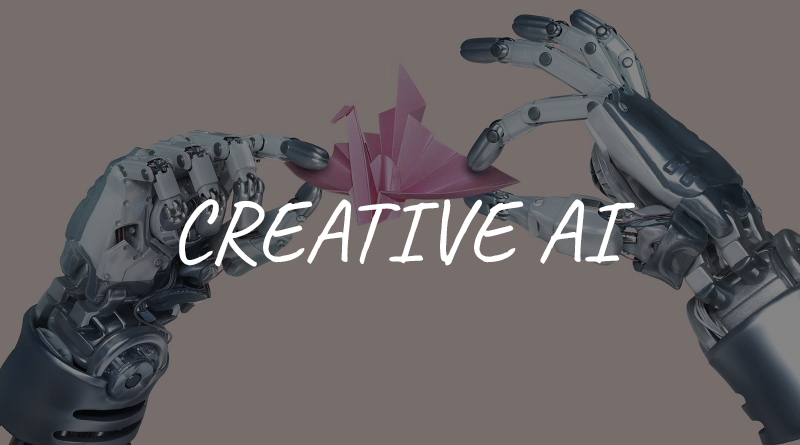
<style>
.page{position:relative;width:800px;height:445px;background:#776e6b}
.page>*{position:absolute;margin:0}
.t1{font:89.2px "Caveat-Regular";color:#ffffff}
</style>
<div class="page">
<p class="t1" style="left:179px;top:199px;width:456px;height:68px">CREATIVE AI</p>
</div>
